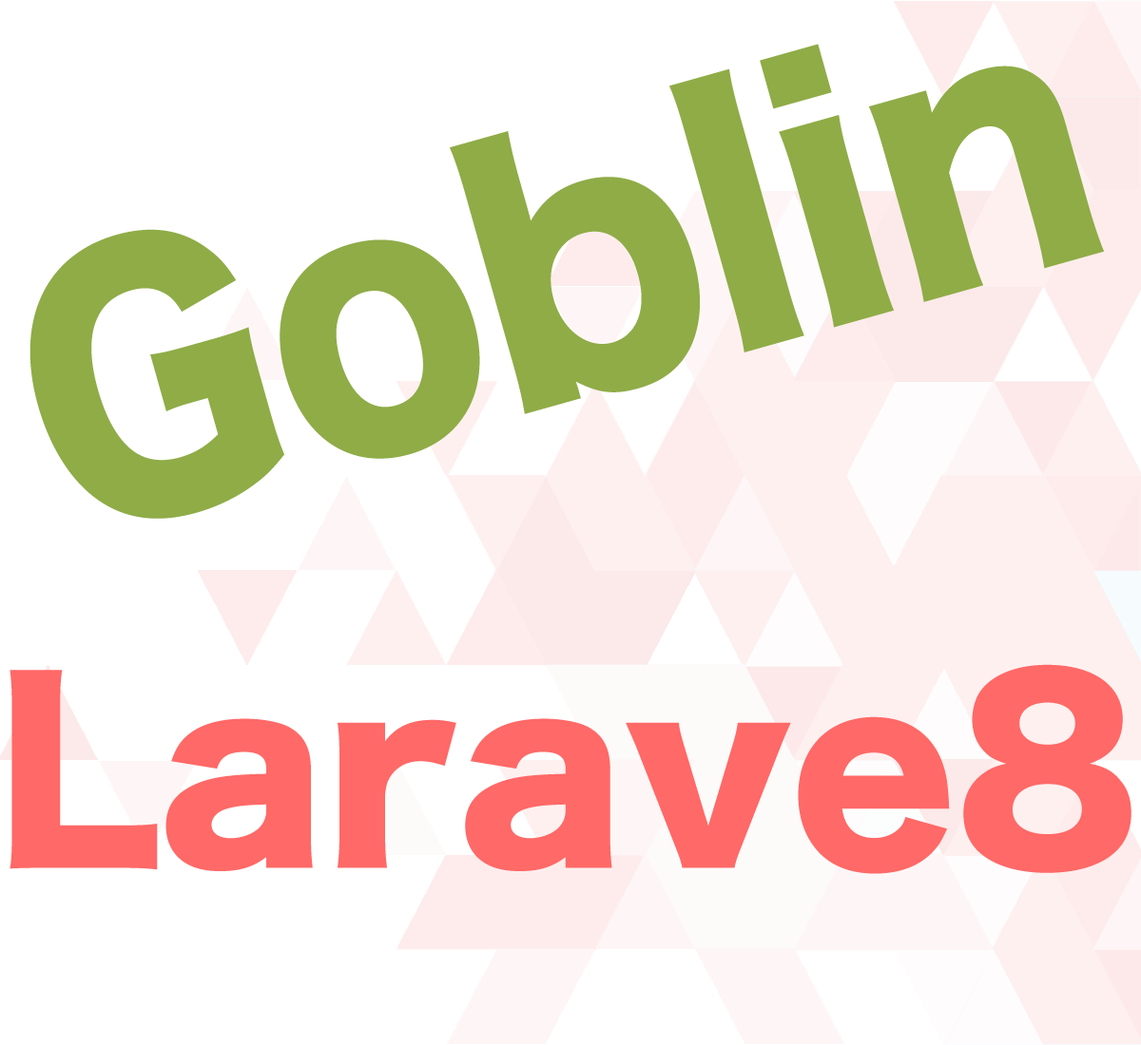
<style>
.page{position:relative;width:1141px;height:1045px;background:#ffffff}
.page>*{position:absolute;margin:0}
.t1{font:332.7px "HiraKakuStd-W8";color:#8fac47;scale:0.89 1}
.t2{font:237.6px "HiraKakuStd-W8";color:#ff6967}
</style>
<div class="page">
<p class="t1" style="left:29px;top:44px;width:1074px;height:475px;rotate:-16deg">Goblin</p>
<p class="t2" style="left:10px;top:664px;width:1121px;height:210px">Larave8</p>
</div>
